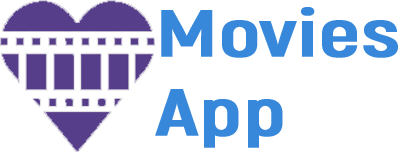
<style>
.page{position:relative;width:400px;height:152px;background:#ffffff}
.page>*{position:absolute;margin:0}
.t1{font:65.7px "Akrobat-Bold";color:#3788db;font-weight:bold;scale:1.34 1}
</style>
<div class="page">
<p class="t1" style="left:155px;top:7px;width:243px;height:141px">Movies<br>App</p>
</div>
